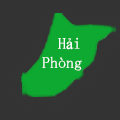
<style>
.page{position:relative;width:120px;height:120px;background:#333333}
.page>*{position:absolute;margin:0}
.t1{font:16px "SimSun";color:#ffffff}
.t2{font:16px "TimesNewRomanPSMT";color:#ffffff}
</style>
<div class="page">
<p class="t1" style="left:42px;top:37px;width:40px;height:34px">H<span class="t2">ả</span>i<br>Phòng</p>
</div>
